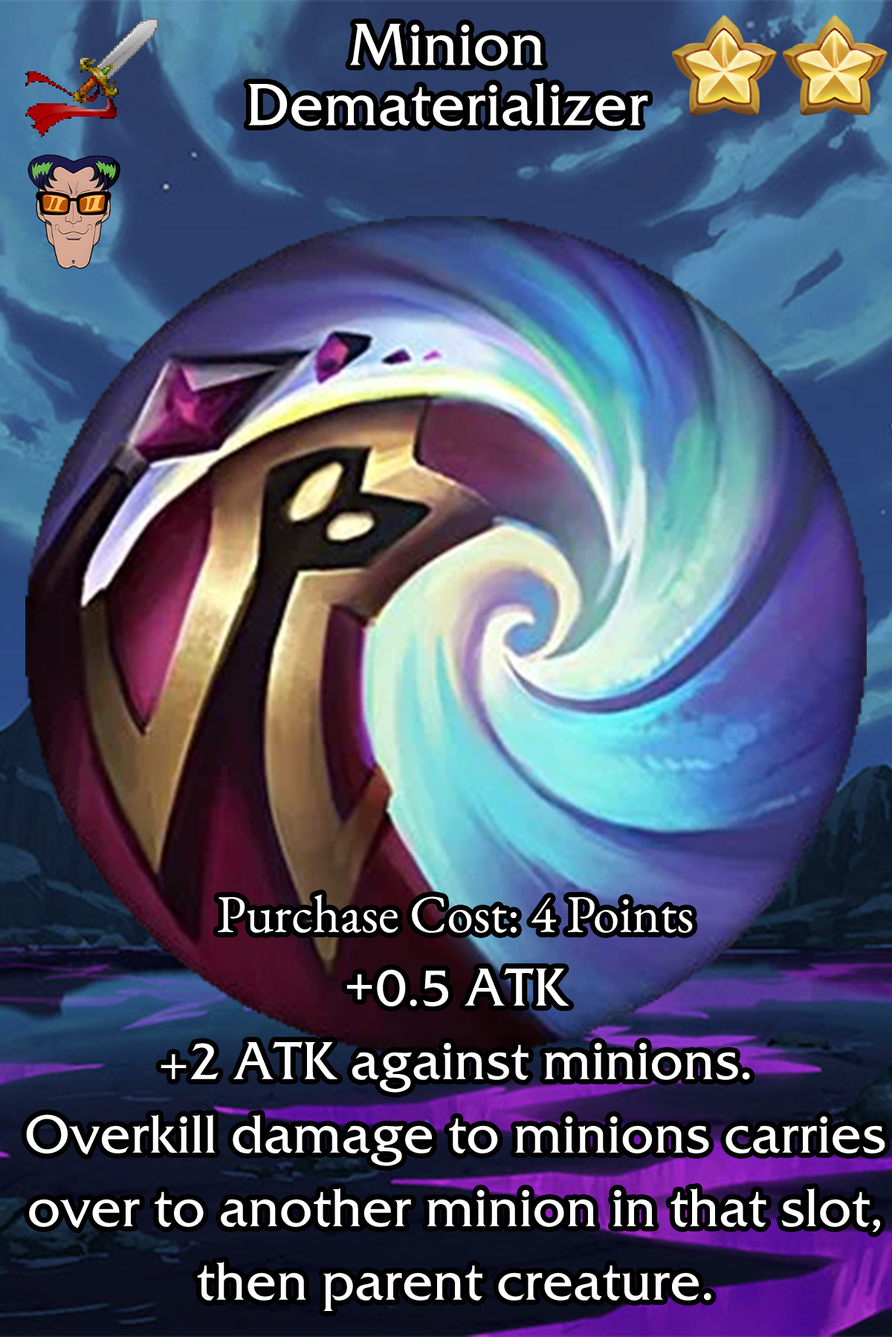
<style>
.page{position:relative;width:892px;height:1337px}
.page>*{position:absolute;margin:0}
.t1{font:101px/60.2px "FrizQua-ReguOS";color:#ffffff}
.t2{font:90.6px/73.6px "FrizQua-ReguOS";color:#ffffff}
.t3{font:90.6px/73.6px "EBGaramond-Regular";color:#ffffff}
.t4{font:90.6px/73.6px "FrizQuadrataStd";color:#ffffff}
</style>
<div class="page">
<p class="t1" style="left:248px;top:24px;width:400px;height:102px;text-align:center">Minion<br>Dematerializer</p>
<p class="t2" style="left:26px;top:895px;width:859px;height:416px;text-align:center"><span class="t3">Purchase Cost: 4 Points<br></span>+<span class="t4">0.5</span> ATK <br><span class="t4">+2</span> ATK against minions.<br>Overkill damage to minions carries over to another minion in that slot, then parent creature.</p>
</div>
